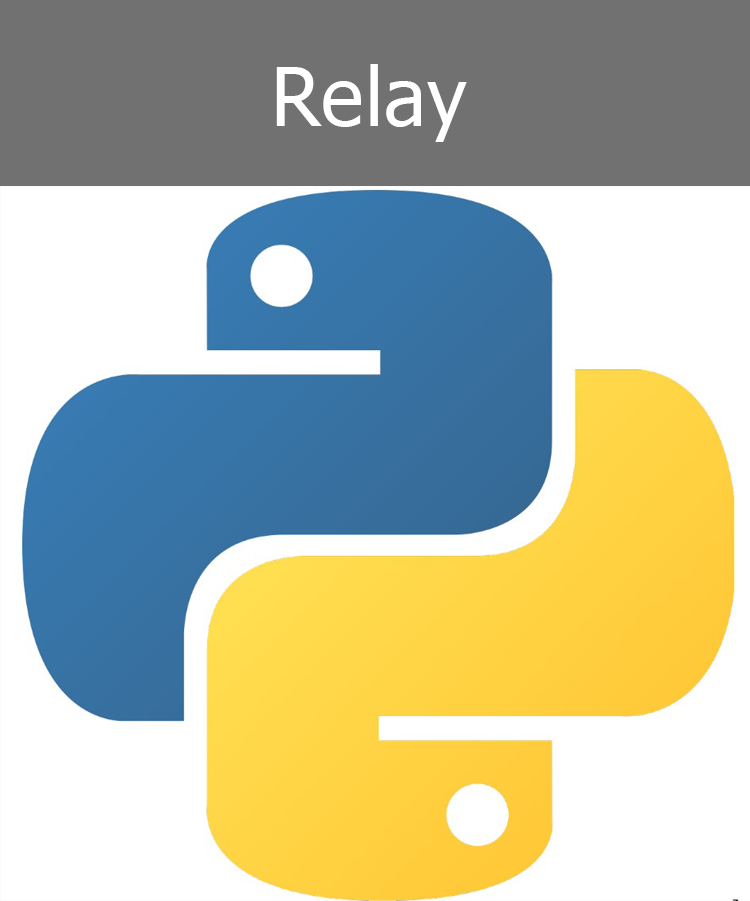
<style>
.page{position:relative;width:750px;height:901px;background:#ffffff}
.page>*{position:absolute;margin:0}
.t1{font:81.5px "Tahoma";letter-spacing:0.02em;color:#ffffff}
</style>
<div class="page">
<p class="t1" style="left:276px;top:64px;width:191px;height:78px">Relay</p>
</div>
